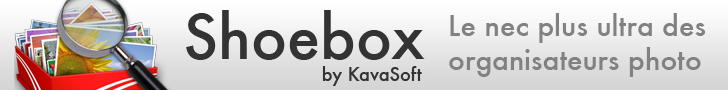
<style>
.page{position:relative;width:728px;height:90px}
.page>*{position:absolute;margin:0}
.t1{font:18px "Futura-Medium";color:#333333}
.t2{font:60px "Futura-Medium";color:#333333}
.t3{font:28px "Futura-Medium";color:#818181}
</style>
<div class="page">
<p class="t1" style="left:186px;top:10px;width:239px;height:76px"><span class="t2">Shoebox<br></span>                         by KavaSoft</p>
<p class="t3" style="left:449px;top:13px;width:256px;height:64px">Le nec plus ultra des<br>organisateurs photo</p>
</div>
